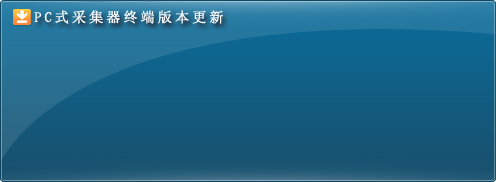
<style>
.page{position:relative;width:496px;height:182px}
.page>*{position:absolute;margin:0}
.t1{font:14px "NSimSun";letter-spacing:0.2em;color:#fffefe;font-weight:bold}
</style>
<div class="page">
<p class="t1" style="left:34px;top:10px;width:189px;height:14px">PC式采集器终端版本更新</p>
</div>
